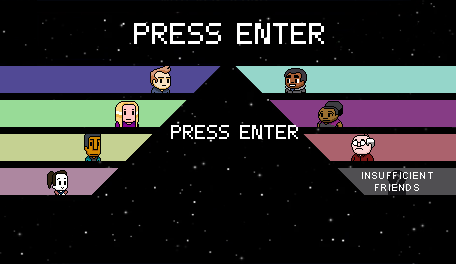
<style>
.page{position:relative;width:456px;height:264px;background:#000000}
.page>*{position:absolute;margin:0}
.t1{font:20px "[-XEN-]-Regular";color:#ffffff}
.t2{font:10.5px "ArialMT";color:#ffffff}
</style>
<div class="page">
<p class="t1" style="left:171px;top:125px;width:127px;height:14px">PRESS ENTER</p>
<p class="t2" style="left:362px;top:172px;width:71px;height:19px;text-align:center">INSUFFICIENT<br>FRIENDS</p>
</div>
